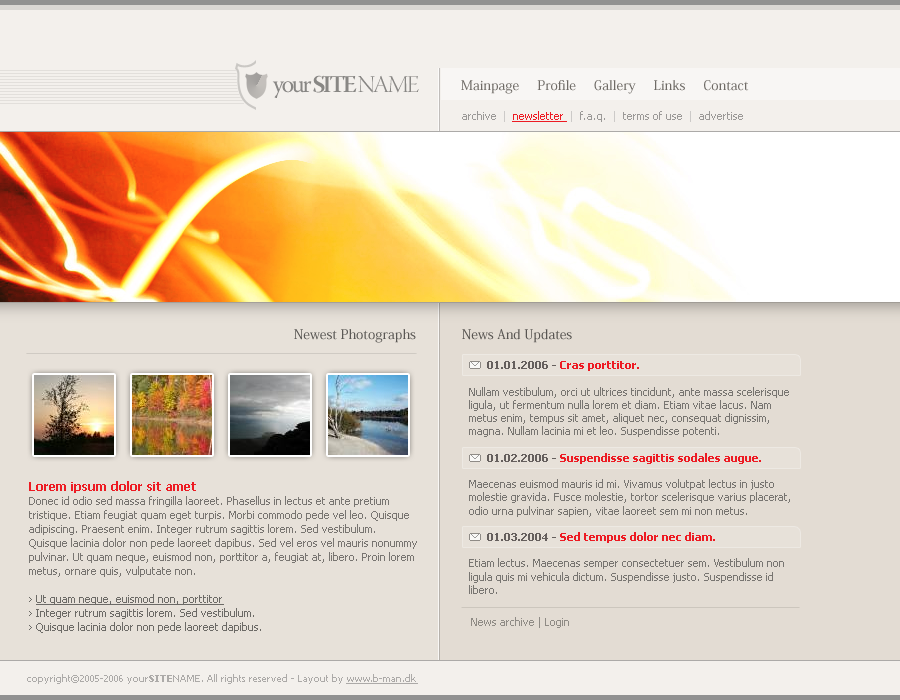
<style>
.page{position:relative;width:900px;height:700px}
.page>*{position:absolute;margin:0}
.t1{font:24px "WarnockPro-Regular";letter-spacing:-0.1em;color:#888784}
.t2{font:24px "WarnockPro-BoldSubh";letter-spacing:-0.1em;color:#888784;text-transform:uppercase}
.t3{font:24px "WarnockPro-LightDisp";letter-spacing:-0.1em;color:#888784;text-transform:uppercase}
.t4{font:13px "KozMinPro-Medium";color:#6f6b66}
.t5{font:11px "Tahoma";color:#9b9997}
.t6{font:11px "Tahoma";color:#cccac8}
.t7{font:11px "Tahoma";color:#ed1b23;text-decoration:underline}
.t8{font:13px "KozMinPro-Medium";color:#5a5754}
.t9{font:13px "KozMinPro-Medium";color:#585552}
.t10{font:11px "Tahoma";color:#787571}
.t11{font:11px "Tahoma-Bold";color:#fe5714}
.t12{font:11px "Tahoma-Bold";color:#655f5d}
.t13{font:11px "Tahoma-Bold";color:#ed1b23}
.t14{font:11px "Tahoma";color:#655f5d}
.t15{font:11px "Tahoma";color:#000000}
.t16{font:11px/14px "Tahoma";color:#787571}
.t17{font:12px/30px "Tahoma-Bold";color:#ed1b23}
.t18{font:11px/14px "Tahoma";color:#6c6a66}
.t19{font:11px/14px "Tahoma";color:#6c6a66;text-decoration:underline}
.t20{font:11px "Tahoma";color:#8f8b85}
.t21{font:10px "Tahoma";color:#acaaa8}
.t22{font:10px "Tahoma-Bold";color:#acaaa8}
.t23{font:10px "Tahoma";color:#acaaa8;text-decoration:underline}
</style>
<div class="page">
<p class="t1" style="left:272px;top:75px;width:147px;height:23px">your <span class="t2">site </span><span class="t3">name</span></p>
<p class="t4" style="left:461px;top:80px;width:288px;height:14px">Mainpage     Profile     Gallery     Links     Contact</p>
<p class="t5" style="left:462px;top:111px;width:281px;height:11px">archive  <span class="t6">|  </span><span class="t7">newsletter  </span><span class="t6">|  </span>f.a.q.  <span class="t6">|  </span>terms of use  <span class="t6">|  </span>advertise</p>
<p class="t8" style="left:294px;top:329px;width:122px;height:14px">Newest Photographs</p>
<p class="t9" style="left:462px;top:329px;width:110px;height:14px">News And Updates</p>
<p class="t10" style="left:469px;top:361px;width:321px;height:233px"><span class="t11">      </span><span class="t12">01.01.2006 - </span><span class="t13">Cras porttitor.</span><span class="t14"> <br></span><span class="t15"><br></span>Nullam vestibulum, orci ut ultrices tincidunt, ante massa scelerisque ligula, ut fermentum nulla lorem et diam. Etiam vitae lacus. Nam metus enim, tempus sit amet, aliquet nec, consequat dignissim, magna. Nullam lacinia mi et leo. Suspendisse potenti. <br><br>      <span class="t12">01.02.2006 - </span><span class="t13">Suspendisse sagittis sodales augue.<br></span><span class="t15"><br></span>Maecenas euismod mauris id mi. Vivamus volutpat lectus in justo molestie gravida. Fusce molestie, tortor scelerisque varius placerat, odio urna pulvinar sapien, vitae laoreet sem mi non metus. <br><span class="t15"><br>     </span><span class="t12"> 01.03.2004 - </span><span class="t13">Sed tempus dolor nec diam. <br></span><span class="t15"><br></span>Etiam lectus. Maecenas semper consectetuer sem. Vestibulum non ligula quis mi vehicula dictum. Suspendisse justo. Suspendisse id libero.</p>
<p class="t16" style="left:29px;top:481px;width:388px;height:152px"><span class="t17">Lorem ipsum dolor sit amet<br></span>Donec id odio sed massa fringilla laoreet. Phasellus in lectus et ante pretium tristique. Etiam feugiat quam eget turpis. Morbi commodo pede vel leo. Quisque adipiscing. Praesent enim. Integer rutrum sagittis lorem. Sed vestibulum. Quisque lacinia dolor non pede laoreet dapibus. Sed vel eros vel mauris nonummy pulvinar. Ut quam neque, euismod non, porttitor a, feugiat at, libero. Proin lorem metus, ornare quis, vulputate non.<br><br><span class="t18">› </span><span class="t19">Ut quam neque, euismod non, porttitor<br></span><span class="t18">› Integer rutrum sagittis lorem. Sed vestibulum.<br>› Quisque lacinia dolor non pede laoreet dapibus.</span></p>
<p class="t20" style="left:471px;top:617px;width:98px;height:11px">News archive | Login</p>
<p class="t21" style="left:27px;top:674px;width:391px;height:10px">copyright©2005-2006 your<span class="t22">SITE</span>NAME. All rights reserved - Layout by <span class="t23">www.b-man.dk</span></p>
</div>
